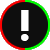
<style>
.page{position:relative;width:50px;height:50px;background:#0e0e0e}
.page>*{position:absolute;margin:0}
.t1{font:42.2px "TheBoldFont";color:#ffffff}
</style>
<div class="page">
<p class="t1" style="left:21px;top:10px;width:8px;height:31px">!</p>
</div>
